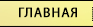
<style>
.page{position:relative;width:93px;height:27px}
.page>*{position:absolute;margin:0}
.t1{font:14px "MyriadPro-Regular";letter-spacing:0.05em;color:#000000;font-weight:bold;scale:0.96 1}
</style>
<div class="page">
<p class="t1" style="left:19px;top:7px;width:58px;height:11px">ГЛАВНАЯ</p>
</div>
